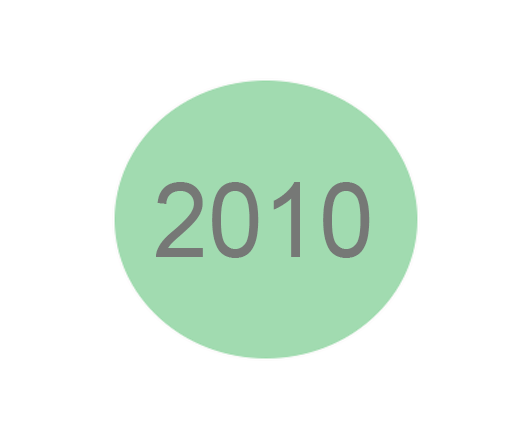
<style>
.page{position:relative;width:519px;height:433px;background:#ffffff}
.page>*{position:absolute;margin:0}
.t1{font:104.8px "ArialMT";color:#767876;scale:0.95 1}
</style>
<div class="page">
<p class="t1" style="left:156px;top:182px;width:214px;height:76px">2010</p>
</div>
